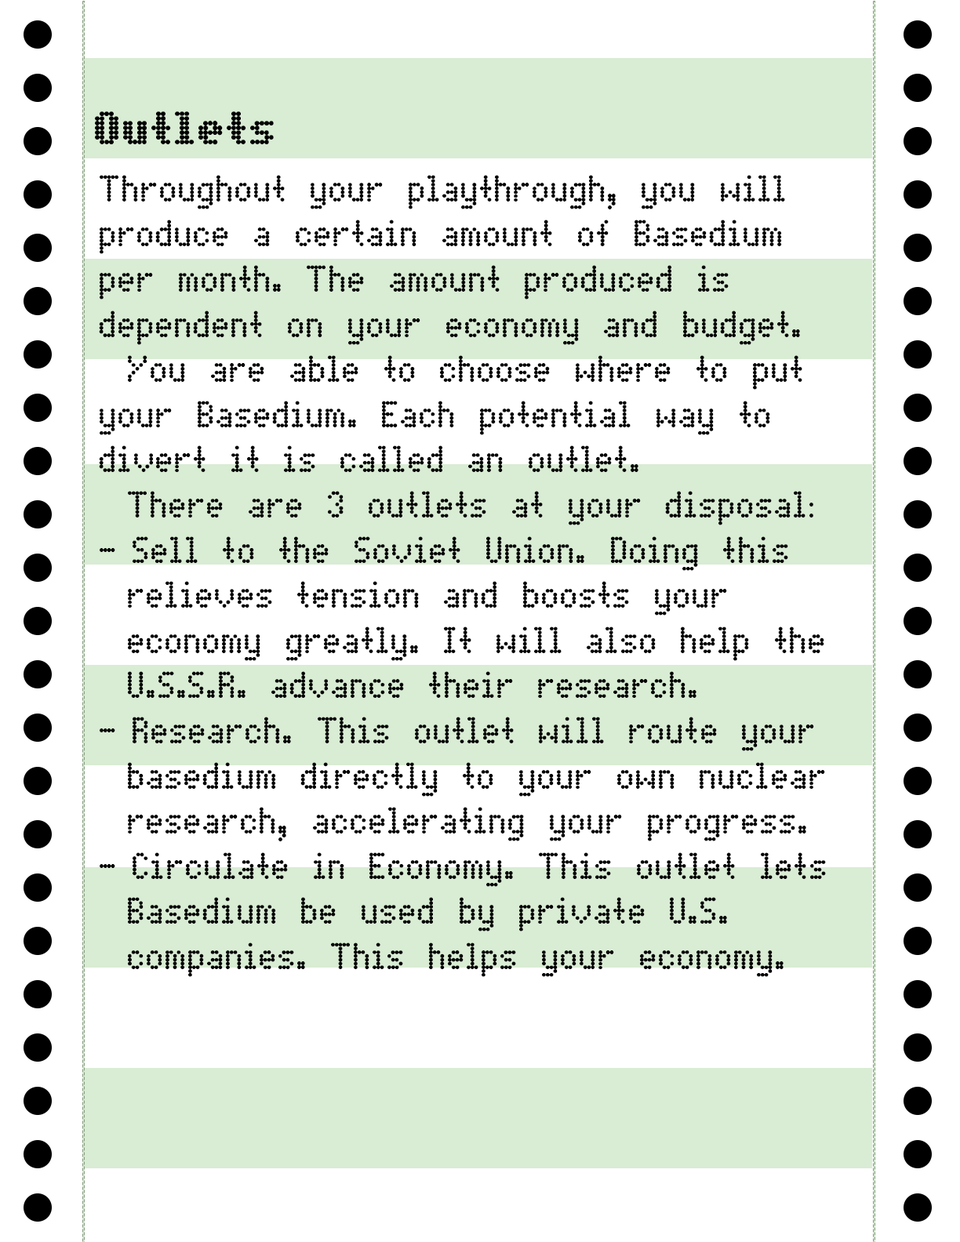
<style>
.page{position:relative;width:960px;height:1242px;background:#ffffff}
.page>*{position:absolute;margin:0}
.t1{font:47.1px "DotMatrixBold";color:#000000}
.t2{font:37.6px "DotMatrix";color:#000000}
</style>
<div class="page">
<p class="t1" style="left:95px;top:111px;width:179px;height:34px">Outlets</p>
<p class="t2" style="left:99px;top:175px;width:727px;height:802px">Throughout your playthrough, you will<br>produce a certain amount of Basedium<br>per month. The amount produced is<br>dependent on your economy and budget.<br> You are able to choose where to put<br>your Basedium. Each potential way to<br>divert it is called an outlet.<br> There are 3 outlets at your disposal:<br>Sell to the Soviet Union. Doing this<br> relieves tension and boosts your<br> economy greatly. It will also help the<br> U.S.S.R. advance their research.<br>Research. This outlet will route your<br> basedium directly to your own nuclear<br> research, accelerating your progress.<br>Circulate in Economy. This outlet lets<br> Basedium be used by private U.S.<br> companies. This helps your economy.</p>
</div>
